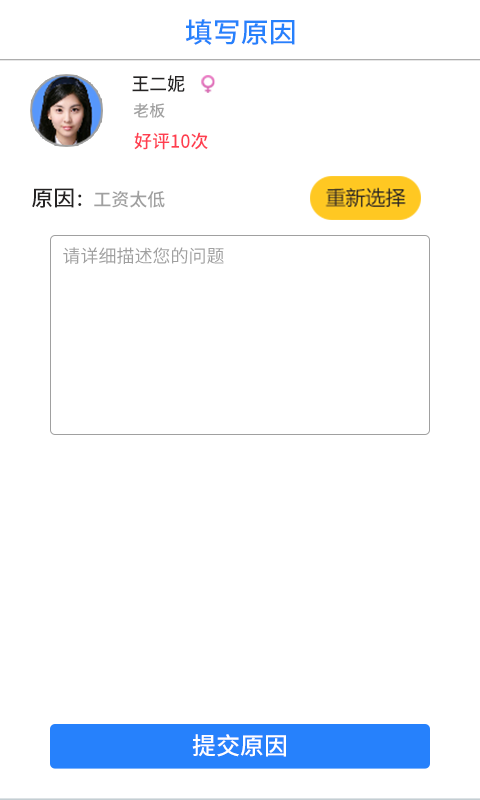
<style>
.page{position:relative;width:480px;height:800px;background:#ffffff}
.page>*{position:absolute;margin:0}
.t1{font:28px "NotoSansHans-Medium";color:#2681fc}
.t2{font:18.3px "NotoSansHans-Medium";color:#252323}
.t3{font:16px "NotoSansHans-Medium";color:#a0a0a0}
.t4{font:18px "NotoSansHans-Medium";color:#ff3e50}
.t5{font:18px "NotoSansHans-Medium";color:#a0a0a0}
.t6{font:22px "NotoSansHans-Medium";color:#252323}
.t7{font:18px "NotoSansHans-Medium";color:#252323}
.t8{font:18px "NotoSansHans-Regular";color:#a0a0a0}
.t9{font:24px "NotoSansHans-Medium";color:#ffffff}
</style>
<div class="page">
<p class="t1" style="left:185px;top:19px;width:110px;height:26px">填写原因</p>
<p class="t2" style="left:132px;top:75px;width:53px;height:17px">王二妮</p>
<p class="t3" style="left:133px;top:103px;width:32px;height:15px">老板</p>
<p class="t4" style="left:134px;top:132px;width:74px;height:18px">好评10次</p>
<p class="t5" style="left:32px;top:188px;width:133px;height:20px"><span class="t6">原因</span><span class="t7">：</span>工资太低</p>
<p class="t8" style="left:63px;top:247px;width:161px;height:17px">请详细描述您的问题</p>
<p class="t9" style="left:192px;top:734px;width:94px;height:23px">提交原因</p>
</div>
